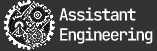
<style>
.page{position:relative;width:157px;height:51px;background:#333333}
.page>*{position:absolute;margin:0}
.t1{font:16.7px "JetBrainsMono-Medium";letter-spacing:-0.09em;color:#ffffff}
</style>
<div class="page">
<p class="t1" style="left:59px;top:7px;width:94px;height:37px">Assistant<br>Engineering</p>
</div>
